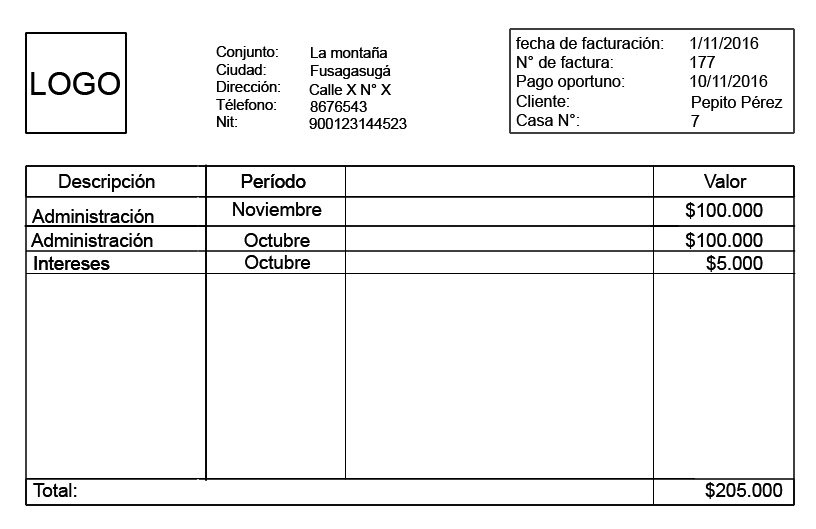
<style>
.page{position:relative;width:816px;height:529px;background:#ffffff}
.page>*{position:absolute;margin:0}
.t1{font:16px "ArialMT";color:#000000}
.t2{font:12px "ArialMT";color:#000000}
.t3{font:14.7px "ArialMT";color:#000000}
.t4{font:32px "ArialMT";color:#000000}
.t5{font:18.7px "ArialMT";color:#000000}
</style>
<div class="page">
<p class="t1" style="left:516px;top:37px;width:148px;height:89px">fecha de facturación:<br>N° de factura:<br>Pago oportuno:<br>Cliente:<br>Casa N°:</p>
<p class="t1" style="left:516px;top:37px;width:148px;height:89px">fecha de facturación:<br>N° de factura:<br>Pago oportuno:<br>Cliente:<br>Casa N°:</p>
<p class="t2" style="left:690px;top:37px;width:69px;height:12px">1/11/2016</p>
<p class="t2" style="left:690px;top:37px;width:69px;height:12px">1/11/2016</p>
<p class="t3" style="left:216px;top:46px;width:64px;height:81px">Conjunto:<br>Ciudad:<br>Dirección:<br>Télefono:<br>Nit:</p>
<p class="t3" style="left:216px;top:46px;width:64px;height:81px">Conjunto:<br>Ciudad:<br>Dirección:<br>Télefono:<br>Nit:</p>
<p class="t3" style="left:311px;top:47px;width:76px;height:11px">La montaña</p>
<p class="t3" style="left:311px;top:47px;width:76px;height:11px">La montaña</p>
<p class="t3" style="left:311px;top:65px;width:80px;height:14px">Fusagasugá</p>
<p class="t3" style="left:311px;top:65px;width:80px;height:14px">Fusagasugá</p>
<p class="t2" style="left:690px;top:56px;width:25px;height:12px">177</p>
<p class="t2" style="left:690px;top:56px;width:25px;height:12px">177</p>
<p class="t4" style="left:31px;top:72px;width:89px;height:23px">LOGO</p>
<p class="t4" style="left:31px;top:72px;width:89px;height:23px">LOGO</p>
<p class="t2" style="left:690px;top:75px;width:78px;height:12px">10/11/2016</p>
<p class="t2" style="left:690px;top:75px;width:78px;height:12px">10/11/2016</p>
<p class="t3" style="left:309px;top:84px;width:82px;height:11px">Calle X N° X</p>
<p class="t3" style="left:309px;top:84px;width:82px;height:11px">Calle X N° X</p>
<p class="t3" style="left:310px;top:101px;width:57px;height:11px">8676543</p>
<p class="t3" style="left:310px;top:101px;width:57px;height:11px">8676543</p>
<p class="t2" style="left:692px;top:96px;width:91px;height:15px">Pepito Pérez</p>
<p class="t2" style="left:692px;top:96px;width:91px;height:15px">Pepito Pérez</p>
<p class="t3" style="left:309px;top:118px;width:98px;height:11px">900123144523</p>
<p class="t3" style="left:309px;top:118px;width:98px;height:11px">900123144523</p>
<p class="t2" style="left:691px;top:115px;width:9px;height:12px">7</p>
<p class="t2" style="left:691px;top:115px;width:9px;height:12px">7</p>
<p class="t5" style="left:59px;top:174px;width:96px;height:18px">Descripción</p>
<p class="t5" style="left:59px;top:174px;width:96px;height:18px">Descripción</p>
<p class="t5" style="left:704px;top:174px;width:43px;height:14px">Valor</p>
<p class="t5" style="left:704px;top:174px;width:43px;height:14px">Valor</p>
<p class="t5" style="left:32px;top:209px;width:122px;height:14px">Administración</p>
<p class="t5" style="left:32px;top:209px;width:122px;height:14px">Administración</p>
<p class="t5" style="left:233px;top:202px;width:89px;height:14px">Noviembre</p>
<p class="t5" style="left:233px;top:202px;width:89px;height:14px">Noviembre</p>
<p class="t5" style="left:685px;top:202px;width:78px;height:17px">$100.000</p>
<p class="t5" style="left:685px;top:202px;width:78px;height:17px">$100.000</p>
<p class="t5" style="left:31px;top:233px;width:122px;height:14px">Administración</p>
<p class="t5" style="left:31px;top:233px;width:122px;height:14px">Administración</p>
<p class="t5" style="left:244px;top:233px;width:66px;height:14px">Octubre</p>
<p class="t5" style="left:244px;top:233px;width:66px;height:14px">Octubre</p>
<p class="t5" style="left:685px;top:232px;width:78px;height:17px">$100.000</p>
<p class="t5" style="left:685px;top:232px;width:78px;height:17px">$100.000</p>
<p class="t5" style="left:245px;top:255px;width:66px;height:14px">Octubre</p>
<p class="t5" style="left:245px;top:255px;width:66px;height:14px">Octubre</p>
<p class="t5" style="left:706px;top:255px;width:57px;height:17px">$5.000</p>
<p class="t5" style="left:706px;top:255px;width:57px;height:17px">$5.000</p>
<p class="t5" style="left:33px;top:483px;width:44px;height:14px">Total:</p>
<p class="t5" style="left:33px;top:483px;width:44px;height:14px">Total:</p>
<p class="t5" style="left:705px;top:482px;width:78px;height:17px">$205.000</p>
<p class="t5" style="left:705px;top:482px;width:78px;height:17px">$205.000</p>
</div>
